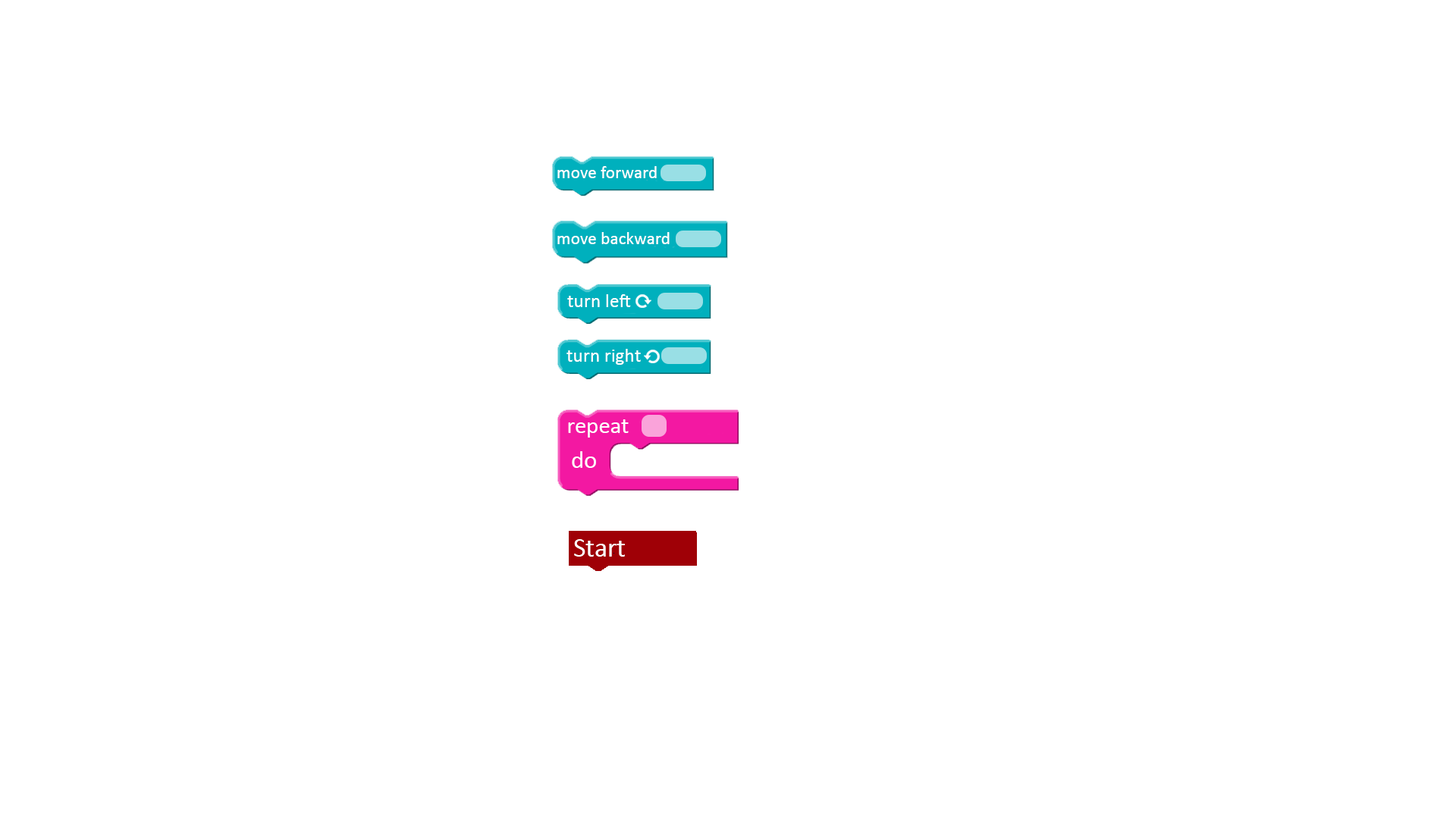
<style>
.page{position:relative;width:1456px;height:819px;background:#ffffff}
.page>*{position:absolute;margin:0}
.t1{font:17.7px "Calibri";color:#ffffff}
.t2{font:19.3px "Calibri";color:#ffffff}
.t3{font:23.4px "Calibri";color:#ffffff}
.t4{font:25.1px "Calibri";color:#ffffff}
</style>
<div class="page">
<p class="t1" style="left:557px;top:166px;width:100px;height:12px">move forward</p>
<p class="t1" style="left:557px;top:232px;width:113px;height:12px">move backward</p>
<p class="t2" style="left:567px;top:294px;width:64px;height:13px">turn left</p>
<p class="t2" style="left:566px;top:349px;width:75px;height:16px">turn right</p>
<p class="t3" style="left:568px;top:419px;width:61px;height:19px">repeat</p>
<p class="t4" style="left:572px;top:451px;width:24px;height:17px">do</p>
</div>
